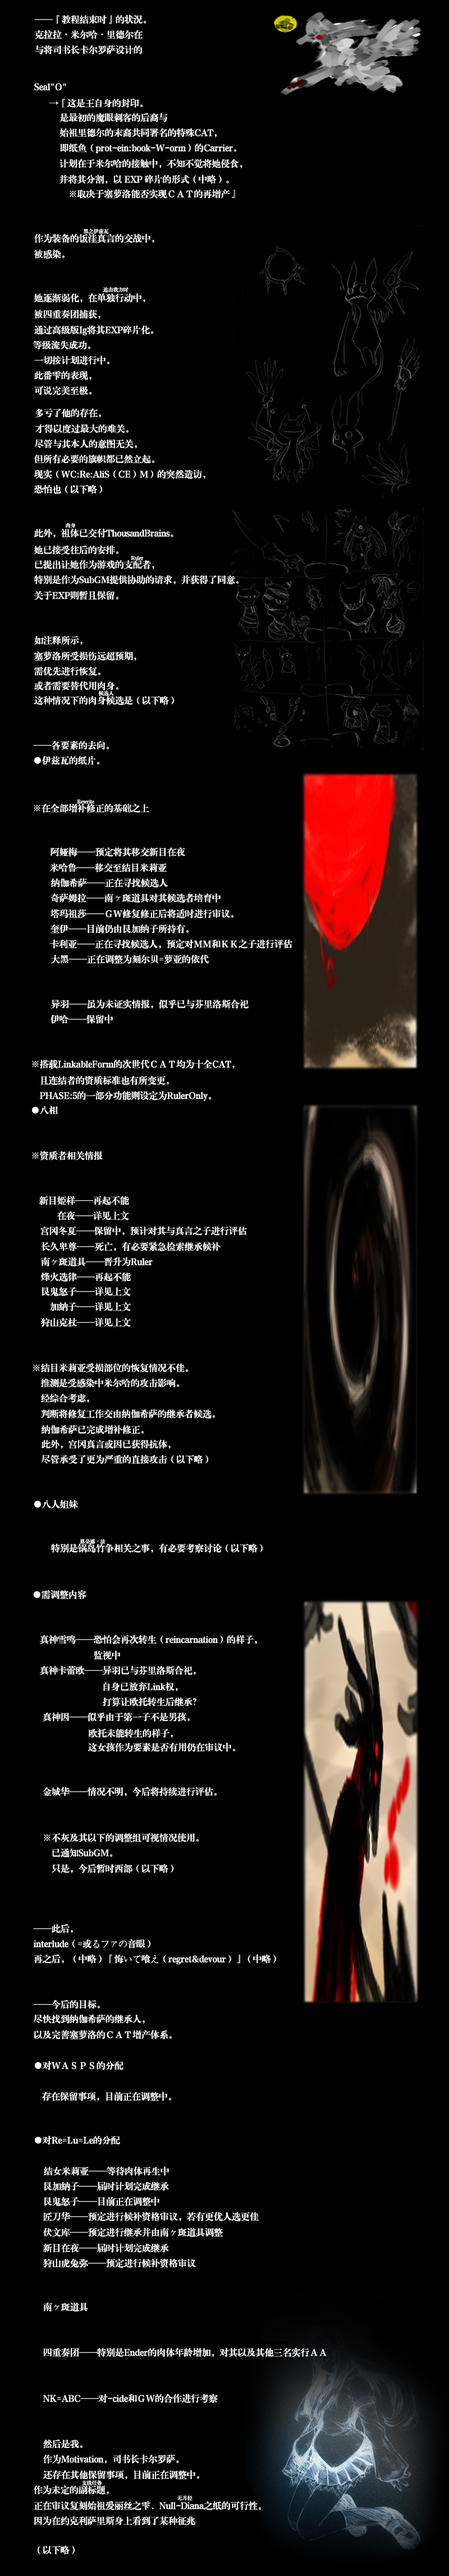
<style>
.page{position:relative;width:449px;height:2576px;background:#000000}
.page>*{position:absolute;margin:0}
.t1{font:9px "FZXBSK--GBK1-0";color:#ffffff}
.t2{font:9px "KozGoPr6N-Regular";color:#ffffff}
.t3{font:5.1px "FZXBSK--GBK1-0";color:#ffffff}
.t4{font:5.1px "KozGoPr6N-Regular";color:#ffffff}
</style>
<div class="page">
<p class="t1" style="left:34px;top:15px;width:112px;height:9px">──『教程结束时』的状況。</p>
<p class="t1" style="left:35px;top:30px;width:108px;height:9px">克拉拉<span class="t2">・</span>米尔哈<span class="t2">・</span>里德尔在</p>
<p class="t1" style="left:35px;top:45px;width:108px;height:9px">与将司书长卡尔罗萨设计的</p>
<p class="t1" style="left:34px;top:83px;width:32px;height:7px">Seal"O"</p>
<p class="t1" style="left:49px;top:98px;width:94px;height:10px">→『这是王自身的封印。</p>
<p class="t1" style="left:60px;top:113px;width:108px;height:9px">是最初的魔眼刺客的后裔与</p>
<p class="t1" style="left:60px;top:128px;width:157px;height:10px">始祖里德尔的末裔共同署名的特殊CAT，</p>
<p class="t1" style="left:60px;top:143px;width:176px;height:10px">即纸鱼（prot-ein:book-W-orm）的Carrier。</p>
<p class="t1" style="left:60px;top:159px;width:182px;height:9px">计划在于米尔哈的接触中，不知不觉将她侵食，</p>
<p class="t1" style="left:59px;top:175px;width:170px;height:9px">并将其分割，以 EXP 碎片的形式（中略）。</p>
<p class="t1" style="left:70px;top:189px;width:165px;height:10px">※取决于塞萝洛能否实现ＣＡＴ的再增产』</p>
<p class="t1" style="left:34px;top:234px;width:120px;height:9px">作为装备的饭洼真言的交战中，</p>
<p class="t3" style="left:84px;top:228px;width:25px;height:6px">黑之伊兹瓦</p>
<p class="t1" style="left:34px;top:249px;width:31px;height:10px">被感染。</p>
<p class="t1" style="left:34px;top:293px;width:111px;height:10px">她逐渐弱化，在单独行动中，</p>
<p class="t3" style="left:103px;top:287px;width:26px;height:5px">追击我方时</p>
<p class="t1" style="left:34px;top:309px;width:66px;height:10px">被四重奏团捕获，</p>
<p class="t1" style="left:34px;top:325px;width:119px;height:11px">通过高级版Ig将其EXP碎片化。</p>
<p class="t1" style="left:33px;top:341px;width:57px;height:9px">等级流失成功。</p>
<p class="t1" style="left:34px;top:355px;width:75px;height:10px">一切按计划进行中。</p>
<p class="t1" style="left:34px;top:370px;width:57px;height:10px">此番雫的表现，</p>
<p class="t1" style="left:34px;top:386px;width:57px;height:9px">可说完美至极。</p>
<p class="t1" style="left:35px;top:408px;width:66px;height:10px">多亏了他的存在，</p>
<p class="t1" style="left:35px;top:424px;width:94px;height:9px">才得以度过最大的难关。</p>
<p class="t1" style="left:35px;top:439px;width:102px;height:10px">尽管与其本人的意图无关，</p>
<p class="t1" style="left:34px;top:454px;width:120px;height:10px">但所有必要的旗帜都已然立起。</p>
<p class="t1" style="left:34px;top:469px;width:171px;height:10px">现实（WC:Re:AliS（CE）M）的突然造访，</p>
<p class="t1" style="left:34px;top:485px;width:68px;height:9px">恐怕也（以下略）</p>
<p class="t1" style="left:34px;top:528px;width:139px;height:10px">此外，祖体已交付ThousandBrains。</p>
<p class="t3" style="left:66px;top:523px;width:10px;height:5px">肉身</p>
<p class="t1" style="left:34px;top:545px;width:84px;height:10px">她已接受往后的安排。</p>
<p class="t3" style="left:131px;top:556px;width:13px;height:4px">Ruler</p>
<p class="t1" style="left:35px;top:560px;width:119px;height:9px">已提出让她作为游戏的支配者，</p>
<p class="t1" style="left:34px;top:575px;width:205px;height:9px">特别是作为SubGM提供协助的请求，并获得了同意。</p>
<p class="t1" style="left:34px;top:591px;width:84px;height:9px">关于EXP则暂且保留。</p>
<p class="t1" style="left:34px;top:636px;width:49px;height:9px">如注释所示，</p>
<p class="t1" style="left:34px;top:651px;width:102px;height:10px">塞萝洛所受损伤远超预期，</p>
<p class="t1" style="left:34px;top:666px;width:66px;height:10px">需优先进行恢复。</p>
<p class="t1" style="left:34px;top:681px;width:84px;height:9px">或者需要替代用肉身。</p>
<p class="t1" style="left:34px;top:696px;width:140px;height:9px">这种情况下的肉身候选是（以下略）</p>
<p class="t3" style="left:98px;top:690px;width:16px;height:6px">候选人</p>
<p class="t1" style="left:33px;top:740px;width:76px;height:10px">──各要素的去向。</p>
<p class="t1" style="left:34px;top:756px;width:65px;height:9px">●伊兹瓦的纸片。</p>
<p class="t1" style="left:34px;top:803px;width:115px;height:10px">※在全部增补修正的基础之上</p>
<p class="t3" style="left:77px;top:799px;width:17px;height:5px">Rewrite</p>
<p class="t1" style="left:51px;top:847px;width:134px;height:10px">阿娅梅──预定将其移交新目在夜</p>
<p class="t1" style="left:50px;top:863px;width:117px;height:9px">米哈鲁──移交至结目米莉亚</p>
<p class="t1" style="left:51px;top:878px;width:117px;height:9px">纳伽希萨──正在寻找候选人</p>
<p class="t1" style="left:51px;top:893px;width:170px;height:10px">奇萨姆拉──南ヶ斑道具对其候选者培育中</p>
<p class="t1" style="left:51px;top:909px;width:183px;height:9px">塔玛祖莎──ＧＷ修复修正后将适时进行审议。</p>
<p class="t1" style="left:51px;top:924px;width:138px;height:10px">奎伊──目前仍由艮加纳子所持有。</p>
<p class="t1" style="left:50px;top:939px;width:242px;height:10px">卡利亚──正在寻找候选人，预定对ＭＭ和ＫＫ之子进行评估</p>
<p class="t1" style="left:51px;top:954px;width:158px;height:10px">大黑──正在调整为刻尔贝=萝亚的依代</p>
<p class="t1" style="left:51px;top:999px;width:198px;height:10px">异羽──虽为未证实情报，似乎已与芬里洛斯合祀</p>
<p class="t1" style="left:51px;top:1014px;width:62px;height:10px">伊哈──保留中</p>
<p class="t1" style="left:32px;top:1059px;width:203px;height:10px">※搭载LinkableForm的次世代ＣＡＴ均为十全CAT，</p>
<p class="t1" style="left:40px;top:1076px;width:129px;height:9px">且连结者的资质标准也有所变更，</p>
<p class="t1" style="left:40px;top:1091px;width:171px;height:10px">PHASE:5的一部分功能则设定为RulerOnly。</p>
<p class="t1" style="left:32px;top:1106px;width:26px;height:8px">●八相</p>
<p class="t1" style="left:32px;top:1151px;width:71px;height:9px">※资质者相关情报</p>
<p class="t1" style="left:39px;top:1196px;width:90px;height:9px">新目姫样──再起不能</p>
<p class="t1" style="left:57px;top:1211px;width:72px;height:9px">在夜──详见上文</p>
<p class="t1" style="left:40px;top:1226px;width:207px;height:10px">宫冈冬夏──保留中，预计对其与真言之子进行评估</p>
<p class="t1" style="left:41px;top:1242px;width:180px;height:9px">长久卑尊──死亡，有必要紧急检索继承候补</p>
<p class="t1" style="left:41px;top:1257px;width:112px;height:9px">南ヶ斑道具──晋升为Ruler</p>
<p class="t1" style="left:41px;top:1273px;width:90px;height:9px">烽火选律──再起不能</p>
<p class="t1" style="left:42px;top:1287px;width:89px;height:9px">艮鬼怒子──详见上文</p>
<p class="t1" style="left:50px;top:1302px;width:81px;height:9px">加納子──详见上文</p>
<p class="t1" style="left:41px;top:1317px;width:90px;height:10px">狩山克杖──详见上文</p>
<p class="t1" style="left:33px;top:1363px;width:155px;height:9px">※结目米莉亚受损部位的恢复情况不佳。</p>
<p class="t1" style="left:41px;top:1378px;width:138px;height:10px">推测是受感染中米尔哈的攻击影响。</p>
<p class="t1" style="left:41px;top:1393px;width:48px;height:10px">经综合考虑，</p>
<p class="t1" style="left:41px;top:1409px;width:174px;height:10px">判断将修复工作交由纳伽希萨的继承者候选。</p>
<p class="t1" style="left:42px;top:1425px;width:102px;height:9px">纳伽希萨已完成增补修正。</p>
<p class="t1" style="left:42px;top:1439px;width:129px;height:10px">此外，宫冈真言或因已获得抗体，</p>
<p class="t1" style="left:42px;top:1454px;width:166px;height:10px">尽管承受了更为严重的直接攻击（以下略）</p>
<p class="t1" style="left:34px;top:1500px;width:44px;height:9px">●八人姐妹</p>
<p class="t3" style="left:80px;top:1539px;width:26px;height:5px">恩朵露<span class="t4">・</span>法</p>
<p class="t1" style="left:51px;top:1544px;width:212px;height:9px">特别是锅岛竹争相关之事，有必要考察讨论（以下略）</p>
<p class="t1" style="left:34px;top:1590px;width:52px;height:9px">●需调整内容</p>
<p class="t1" style="left:40px;top:1635px;width:217px;height:9px">真神雪鸣──恐怕会再次转生（reincarnation）的样子，</p>
<p class="t1" style="left:94px;top:1650px;width:26px;height:10px">监视中</p>
<p class="t1" style="left:40px;top:1666px;width:156px;height:9px">真神卡蕾欧──异羽已与芬里洛斯合祀，</p>
<p class="t1" style="left:103px;top:1682px;width:75px;height:9px">自身已放弃Link权，</p>
<p class="t1" style="left:103px;top:1697px;width:93px;height:9px">打算让欧托转生后继承？</p>
<p class="t1" style="left:43px;top:1712px;width:147px;height:10px">真神因──似乎由于第一子不是男孩，</p>
<p class="t1" style="left:89px;top:1728px;width:84px;height:10px">欧托未能转生的样子，</p>
<p class="t1" style="left:88px;top:1742px;width:147px;height:10px">这女孩作为要素是否有用仍在审议中。</p>
<p class="t1" style="left:43px;top:1787px;width:174px;height:9px">金城华──情况不明，今后将持续进行评估。</p>
<p class="t1" style="left:44px;top:1833px;width:155px;height:9px">※不灰及其以下的调整组可视情况使用。</p>
<p class="t1" style="left:52px;top:1849px;width:60px;height:8px">已通知SubGM。</p>
<p class="t1" style="left:52px;top:1864px;width:121px;height:9px">只是，今后暂时西部（以下略）</p>
<p class="t1" style="left:33px;top:1924px;width:40px;height:9px">──此后，</p>
<p class="t1" style="left:33px;top:1939px;width:117px;height:9px">interlude（=或るファの音眼）</p>
<p class="t1" style="left:34px;top:1954px;width:242px;height:11px">再之后，（中略）『悔いて喰え（regret&amp;devour）』（中略）</p>
<p class="t1" style="left:33px;top:2000px;width:67px;height:9px">──今后的目标。</p>
<p class="t1" style="left:34px;top:2014px;width:111px;height:10px">尽快找到纳伽希萨的继承人，</p>
<p class="t1" style="left:34px;top:2030px;width:138px;height:9px">以及完善塞萝洛的ＣＡＴ增产体系。</p>
<p class="t1" style="left:35px;top:2061px;width:88px;height:9px">●对ＷＡＳＰＳ的分配</p>
<p class="t1" style="left:42px;top:2092px;width:129px;height:9px">存在保留事项，目前正在调整中。</p>
<p class="t1" style="left:35px;top:2135px;width:85px;height:10px">●对Re=Lu=Le的分配</p>
<p class="t1" style="left:44px;top:2166px;width:125px;height:10px">结女米莉亚──等待肉体再生中</p>
<p class="t1" style="left:44px;top:2182px;width:125px;height:9px">艮加納子──届时计划完成继承</p>
<p class="t1" style="left:44px;top:2197px;width:115px;height:9px">艮鬼怒子──目前正在调整中</p>
<p class="t1" style="left:43px;top:2212px;width:216px;height:9px">匠刀华──预定进行候补资格审议，若有更优人选更佳</p>
<p class="t1" style="left:43px;top:2227px;width:180px;height:10px">伏文库──预定进行继承并由南ヶ斑道具调整</p>
<p class="t1" style="left:43px;top:2243px;width:126px;height:10px">新目在夜──届时计划完成继承</p>
<p class="t1" style="left:43px;top:2258px;width:153px;height:10px">狩山虎兔弥──预定进行候补资格审议</p>
<p class="t1" style="left:43px;top:2303px;width:45px;height:9px">南ヶ斑道具</p>
<p class="t1" style="left:44px;top:2348px;width:283px;height:9px">四重奏团──特别是Ender的肉体年龄增加，对其以及其他三名实行ＡＡ</p>
<p class="t1" style="left:43px;top:2394px;width:175px;height:9px">NK=ABC──对-cide和ＧＷ的合作进行考察</p>
<p class="t1" style="left:43px;top:2440px;width:40px;height:9px">然后是我。</p>
<p class="t1" style="left:43px;top:2454px;width:136px;height:10px">作为Motivation，司书长卡尔罗萨。</p>
<p class="t1" style="left:43px;top:2470px;width:156px;height:9px">还存在其他保留事项，目前正在调整中。</p>
<p class="t1" style="left:34px;top:2485px;width:75px;height:10px">作为未定的副标题，</p>
<p class="t3" style="left:81px;top:2480px;width:21px;height:6px">支线任务</p>
<p class="t1" style="left:34px;top:2501px;width:227px;height:9px">正在审议复刻始祖爱丽丝之雫、Null-Diana之纸的可行性。</p>
<p class="t3" style="left:177px;top:2495px;width:16px;height:6px">无月经</p>
<p class="t1" style="left:34px;top:2516px;width:161px;height:9px">因为在约克利萨里斯身上看到了某种征兆</p>
<p class="t1" style="left:38px;top:2546px;width:37px;height:9px">（以下略）</p>
</div>
